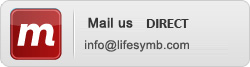
<style>
.page{position:relative;width:250px;height:67px}
.page>*{position:absolute;margin:0}
.t1{font:13px "ArialMT";letter-spacing:0.02em;color:#363636;font-weight:bold}
.t2{font:12px "ArialMT";letter-spacing:0.02em;color:#4e4e4e}
</style>
<div class="page">
<p class="t1" style="left:88px;top:17px;width:45px;height:11px">Mail us</p>
<p class="t2" style="left:85px;top:40px;width:104px;height:12px">info@lifesymb.com</p>
</div>
